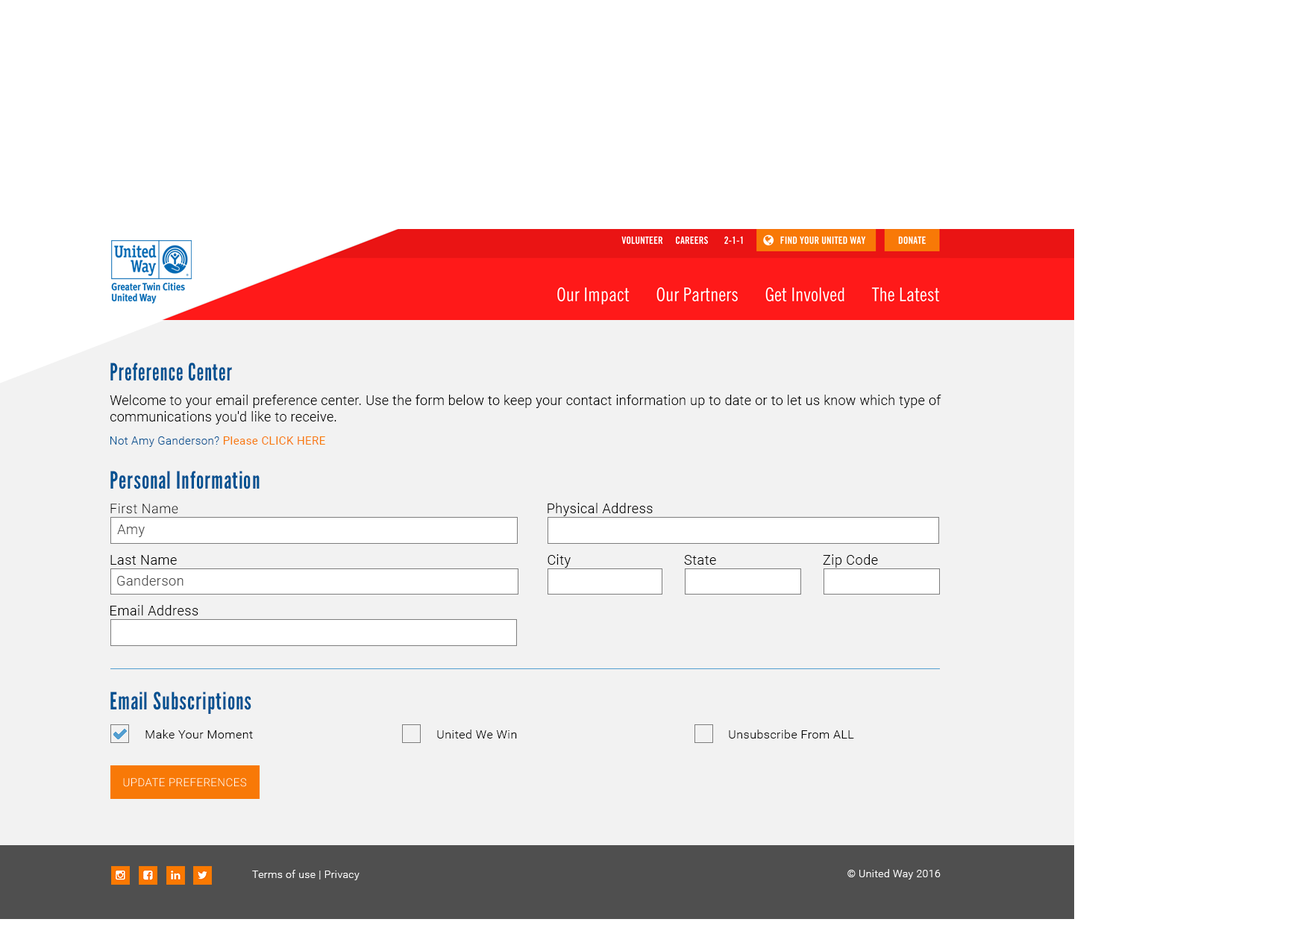
<style>
.page{position:relative;width:1289px;height:925px;background:#ffffff}
.page>*{position:absolute;margin:0}
.t1{font:23.9px "LeagueGothic-Regular";letter-spacing:0.03em;color:#005191;scale:0.94 1}
.t2{font:13.4px/14.9px "Roboto-Light";letter-spacing:0.03em;color:#000000}
.t3{font:11.2px "Roboto-Light";letter-spacing:0.03em;color:#005191}
.t4{font:11.2px "Roboto-Regular";letter-spacing:0.03em;color:#f87907}
.t5{font:23.9px "LeagueGothic-Regular";letter-spacing:0.03em;color:#005191}
.t6{font:13.4px "Roboto-Light";letter-spacing:0.03em;color:#000000}
.t7{font:13.4px "Roboto-Light";letter-spacing:0.03em;color:#4f4f4f}
.t8{font:11.9px "Roboto-Light";letter-spacing:0.03em;color:#000000}
.t9{font:10.4px "Roboto-Light";letter-spacing:0.03em;color:#ffffff}
</style>
<div class="page">
<p class="t1" style="left:110px;top:363px;width:122px;height:18px">Preference Center</p>
<p class="t2" style="left:110px;top:395px;width:831px;height:29px">Welcome to your email preference center. Use the form below to keep your contact information up to date or to let us know which type of<br>communications you'd like to receive.</p>
<p class="t3" style="left:110px;top:436px;width:215px;height:11px">Not Amy Ganderson? <span class="t4">Please CLICK HERE</span></p>
<p class="t5" style="left:110px;top:471px;width:150px;height:18px">Personal Information</p>
<p class="t6" style="left:110px;top:504px;width:68px;height:10px">First Name</p>
<p class="t6" style="left:548px;top:503px;width:105px;height:13px">Physical Address</p>
<p class="t7" style="left:117px;top:524px;width:28px;height:13px">Amy</p>
<p class="t6" style="left:110px;top:555px;width:67px;height:10px">Last Name</p>
<p class="t6" style="left:548px;top:554px;width:23px;height:14px">City</p>
<p class="t6" style="left:684px;top:555px;width:32px;height:10px">State</p>
<p class="t6" style="left:823px;top:554px;width:55px;height:14px">Zip Code</p>
<p class="t7" style="left:117px;top:575px;width:67px;height:11px">Ganderson</p>
<p class="t6" style="left:110px;top:605px;width:88px;height:10px">Email Address</p>
<p class="t5" style="left:110px;top:692px;width:141px;height:22px">Email Subscriptions</p>
<p class="t8" style="left:145px;top:730px;width:108px;height:9px">Make Your Moment</p>
<p class="t8" style="left:437px;top:730px;width:80px;height:9px">United We Win</p>
<p class="t8" style="left:729px;top:730px;width:125px;height:9px">Unsubscribe From ALL</p>
<p class="t9" style="left:252px;top:870px;width:108px;height:10px">Terms of use | Privacy</p>
<p class="t9" style="left:847px;top:869px;width:94px;height:11px">© United Way 2016</p>
</div>
